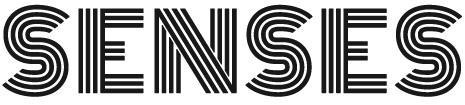
<style>
.page{position:relative;width:465px;height:105px;background:#ffffff}
.page>*{position:absolute;margin:0}
.t1{font:103.6px "Monoton-Regular";color:#181818;font-weight:bold}
</style>
<div class="page">
<p class="t1" style="left:2px;top:4px;width:460px;height:93px">SENSES</p>
</div>
